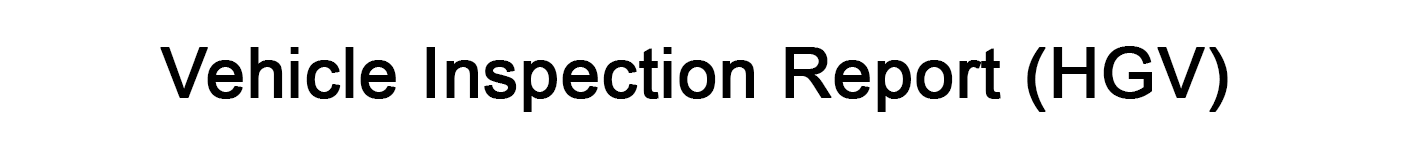
<style>
.page{position:relative;width:1420px;height:150px;background:#ffffff}
.page>*{position:absolute;margin:0}
.t1{font:70px "ArialMT";color:#000000;font-weight:bold}
</style>
<div class="page">
<p class="t1" style="left:160px;top:46px;width:1068px;height:66px">Vehicle Inspection Report (HGV)</p>
</div>
